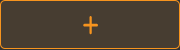
<style>
.page{position:relative;width:180px;height:50px;background:#473d31}
.page>*{position:absolute;margin:0}
.t1{font:38.6px "Comfortaa-Light";color:#f7941e;scale:0.81 1}
</style>
<div class="page">
<p class="t1" style="left:83px;top:16px;width:15px;height:19px">+</p>
</div>
